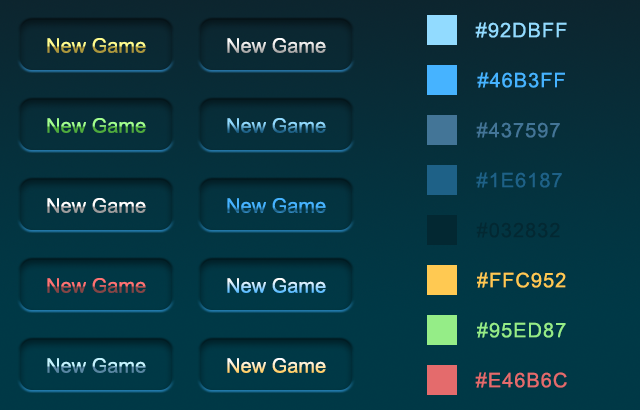
<style>
.page{position:relative;width:640px;height:410px}
.page>*{position:absolute;margin:0}
.t1{font:20px "ArialMT";letter-spacing:0.05em;color:#92dbff;text-transform:uppercase}
.t2{font:20px "ArialMT"}
.t3{font:20px "ArialMT";letter-spacing:0.05em;color:#46b3ff;text-transform:uppercase}
.t4{font:20px "ArialMT";letter-spacing:0.05em;color:#437597;text-transform:uppercase}
.t5{font:20px "ArialMT";letter-spacing:0.05em;color:#1e6187;text-transform:uppercase}
.t6{font:20px "ArialMT";letter-spacing:0.05em;color:#032832;text-transform:uppercase}
.t7{font:20px "ArialMT";letter-spacing:0.05em;color:#ffc952;text-transform:uppercase}
.t8{font:20px "ArialMT";letter-spacing:0.05em;color:#95ed87;text-transform:uppercase}
.t9{font:20px "ArialMT";letter-spacing:0.05em;color:#e46b6c;text-transform:uppercase}
</style>
<div class="page">
<p class="t1" style="left:475px;top:22px;width:92px;height:16px">#92dbff</p>
<p class="t2" style="left:47px;top:38px;width:99px;height:15px">New Game</p>
<p class="t2" style="left:227px;top:38px;width:99px;height:15px">New Game</p>
<p class="t3" style="left:477px;top:72px;width:88px;height:16px">#46b3ff</p>
<p class="t2" style="left:47px;top:118px;width:99px;height:15px">New Game</p>
<p class="t2" style="left:227px;top:118px;width:99px;height:15px">New Game</p>
<p class="t4" style="left:476px;top:122px;width:84px;height:16px">#437597</p>
<p class="t5" style="left:476px;top:172px;width:86px;height:16px">#1e6187</p>
<p class="t2" style="left:47px;top:198px;width:99px;height:15px">New Game</p>
<p class="t2" style="left:227px;top:198px;width:99px;height:15px">New Game</p>
<p class="t6" style="left:476px;top:222px;width:84px;height:16px">#032832</p>
<p class="t2" style="left:47px;top:278px;width:99px;height:15px">New Game</p>
<p class="t2" style="left:227px;top:278px;width:99px;height:15px">New Game</p>
<p class="t7" style="left:477px;top:272px;width:89px;height:16px">#ffc952</p>
<p class="t8" style="left:477px;top:322px;width:89px;height:16px">#95ed87</p>
<p class="t2" style="left:47px;top:358px;width:99px;height:15px">New Game</p>
<p class="t2" style="left:227px;top:358px;width:99px;height:15px">New Game</p>
<p class="t9" style="left:475px;top:372px;width:92px;height:16px">#e46b6c</p>
</div>
